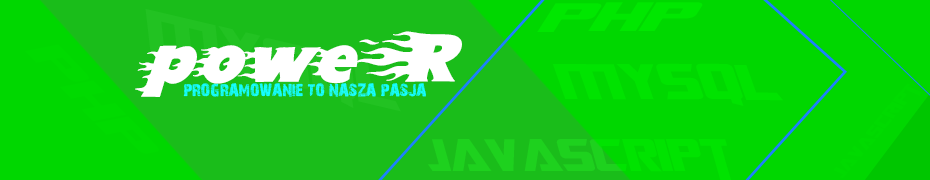
<style>
.page{position:relative;width:930px;height:180px;background:#00d700}
.page>*{position:absolute;margin:0}
.t1{font:54.5px "TransformersMovie";color:#00e700;scale:1.76 1}
.t2{font:67.1px "Blazed";color:#ffffff}
.t3{font:59.6px "TransformersMovie";color:#00e300;scale:1.25 1}
.t4{font:16.9px "28DaysLater";color:#14ffff}
</style>
<div class="page">
<p class="t1" style="left:537px;top:2px;width:166px;height:30px">php</p>
<p class="t2" style="left:135px;top:31px;width:327px;height:66px">poweR</p>
<p class="t3" style="left:552px;top:63px;width:231px;height:43px">MYSQL</p>
<p class="t4" style="left:183px;top:83px;width:243px;height:14px">PROGRAMOWANIE TO NASZA PASJA</p>
</div>
